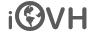
<style>
.page{position:relative;width:96px;height:32px;background:#ffffff}
.page>*{position:absolute;margin:0}
.t1{font:25px "ArialRoundedMTBold";letter-spacing:0.008em;color:#5b5b5b}
.t2{font:30px "ArialRoundedMTBold";letter-spacing:0.008em;color:#5b5b5b}
</style>
<div class="page">
<p class="t1" style="left:8px;top:11px;width:4px;height:19px">i</p>
<p class="t2" style="left:46px;top:7px;width:41px;height:23px">VH</p>
</div>
